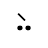
<style>
.page{position:relative;width:48px;height:48px;background:#ffffff}
.page>*{position:absolute;margin:0}
.t1{font:19.7px "SegoeUI-Semibold";color:#000000;scale:0.48 1}
.t2{font:30px "SegoeUI-Bold";color:#000000}
</style>
<div class="page">
<p class="t1" style="left:17px;top:13px;width:9px;height:8px;rotate:-135deg">—</p>
<p class="t2" style="left:17px;top:25px;width:14px;height:6px">..</p>
</div>
